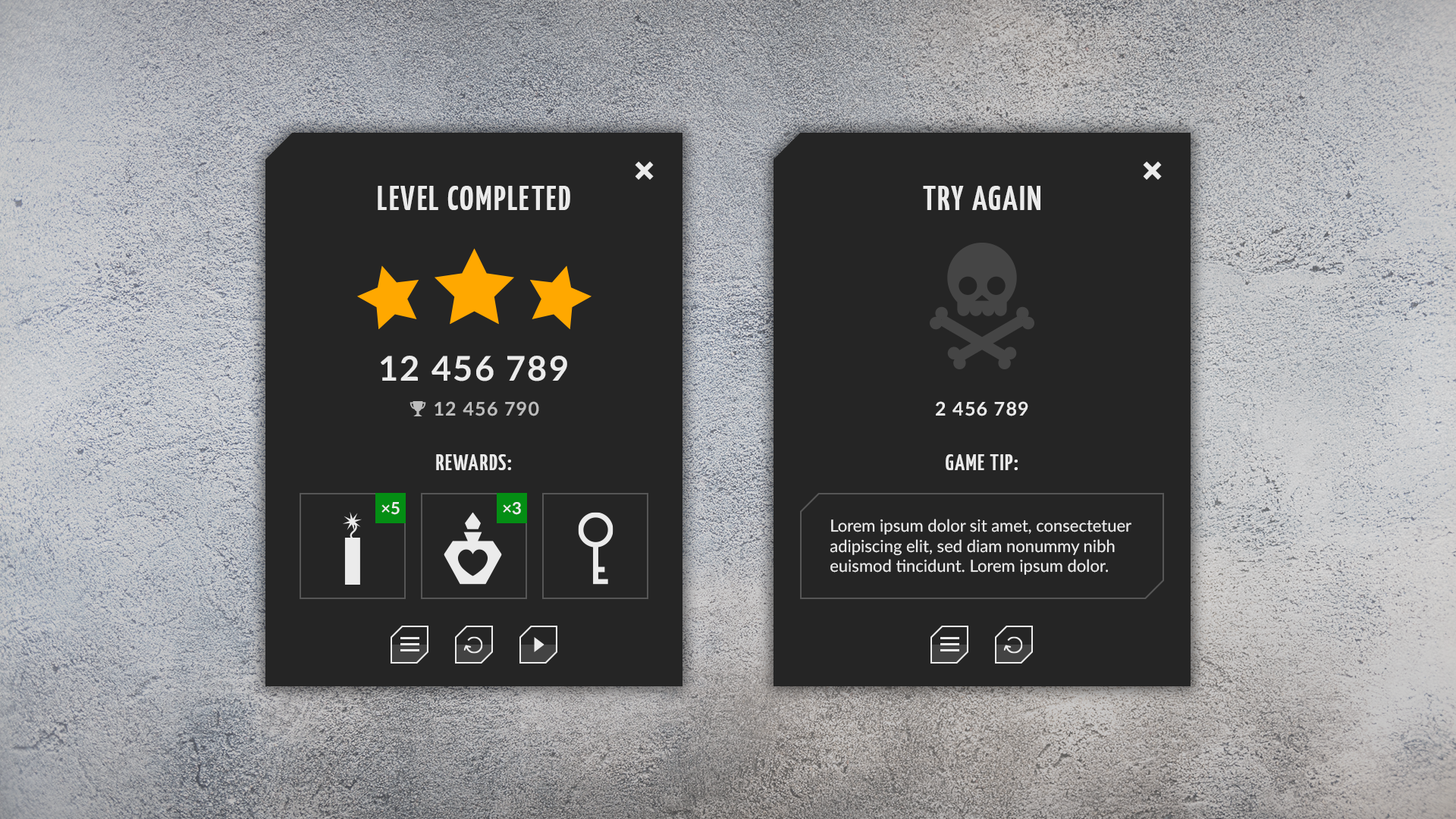
<style>
.page{position:relative;width:1456px;height:819px;background:#252525}
.page>*{position:absolute;margin:0}
.t1{font:37.9px "Arial-BoldMT";letter-spacing:-0.075em;color:#ebebeb}
.t2{font:34.1px "YanoneKaffeesatz-Bold";letter-spacing:0.05em;color:#ebebeb;text-transform:uppercase}
.t3{font:34.1px "Lato-Bold";letter-spacing:0.05em;color:#ebebeb;text-transform:uppercase}
.t4{font:19px "Lato-Bold";letter-spacing:0.05em;color:#bdbdbd}
.t5{font:19px "Lato-Bold";letter-spacing:0.05em;color:#ebebeb;text-transform:uppercase}
.t6{font:22.7px "YanoneKaffeesatz-Bold";letter-spacing:0.05em;color:#ebebeb;text-transform:uppercase}
.t7{font:16.7px "Lato-Bold";color:#ebebeb;text-transform:uppercase}
.t8{font:16.7px "Lato-Regular";color:#ebebeb}
</style>
<div class="page">
<p class="t1" style="left:635px;top:162px;width:19px;height:18px">×</p>
<p class="t1" style="left:1143px;top:162px;width:19px;height:18px">×</p>
<p class="t2" style="left:378px;top:186px;width:192px;height:24px">level completed</p>
<p class="t2" style="left:923px;top:186px;width:117px;height:24px">try again</p>
<p class="t3" style="left:381px;top:356px;width:186px;height:25px">12 456 789</p>
<p class="t4" style="left:435px;top:401px;width:104px;height:15px">12 456 790</p>
<p class="t5" style="left:936px;top:401px;width:92px;height:15px">2 456 789</p>
<p class="t6" style="left:436px;top:454px;width:75px;height:16px">Rewards:</p>
<p class="t6" style="left:946px;top:454px;width:72px;height:16px">game tip:</p>
<p class="t7" style="left:381px;top:502px;width:19px;height:13px">×5</p>
<p class="t7" style="left:503px;top:502px;width:18px;height:13px">×3</p>
<p class="t8" style="left:830px;top:519px;width:301px;height:56px">Lorem ipsum dolor sit amet, consectetuer adipiscing elit, sed diam nonummy nibh euismod tincidunt. Lorem ipsum dolor.</p>
</div>
